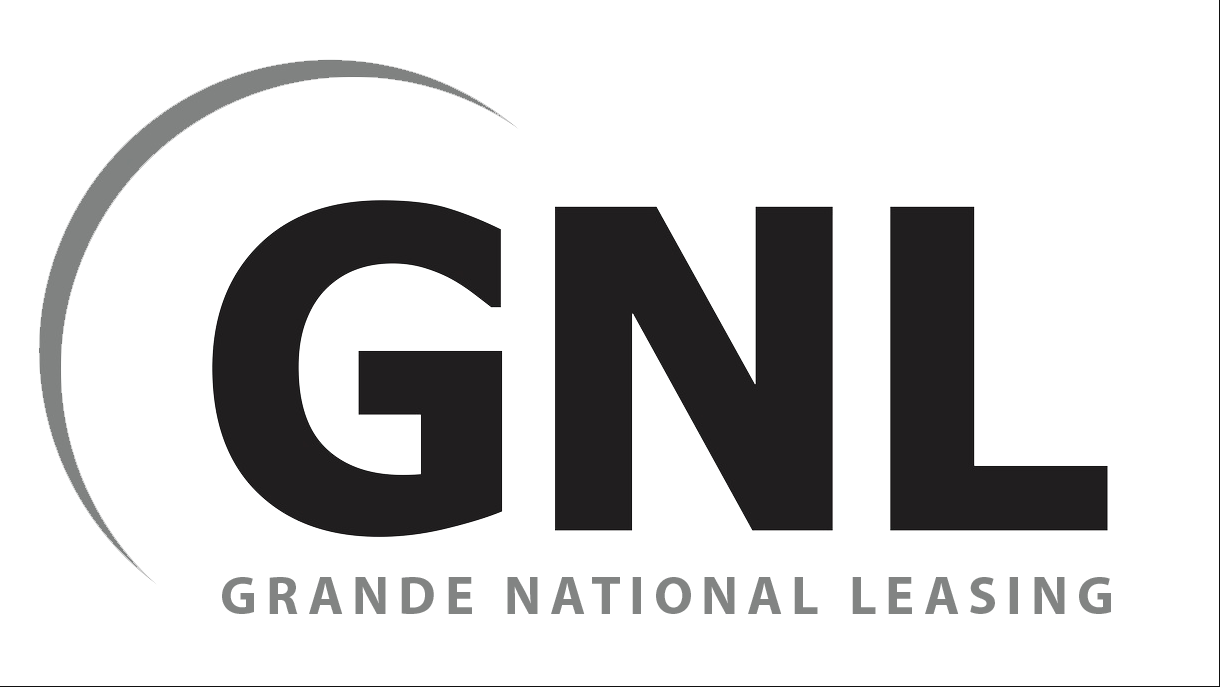
<style>
.page{position:relative;width:1220px;height:687px;background:#ffffff}
.page>*{position:absolute;margin:0}
.t1{font:54px "MyriadPro-Bold";letter-spacing:0.18em;color:#828483}
</style>
<div class="page">
<p class="t1" style="left:222px;top:577px;width:889px;height:37px">GRANDE NATIONAL LEASING</p>
</div>
